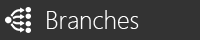
<style>
.page{position:relative;width:200px;height:40px;background:#333333}
.page>*{position:absolute;margin:0}
.t1{font:25px "SegoeUI-Light";color:#ffffff}
</style>
<div class="page">
<p class="t1" style="left:47px;top:10px;width:92px;height:19px">Branches</p>
</div>
